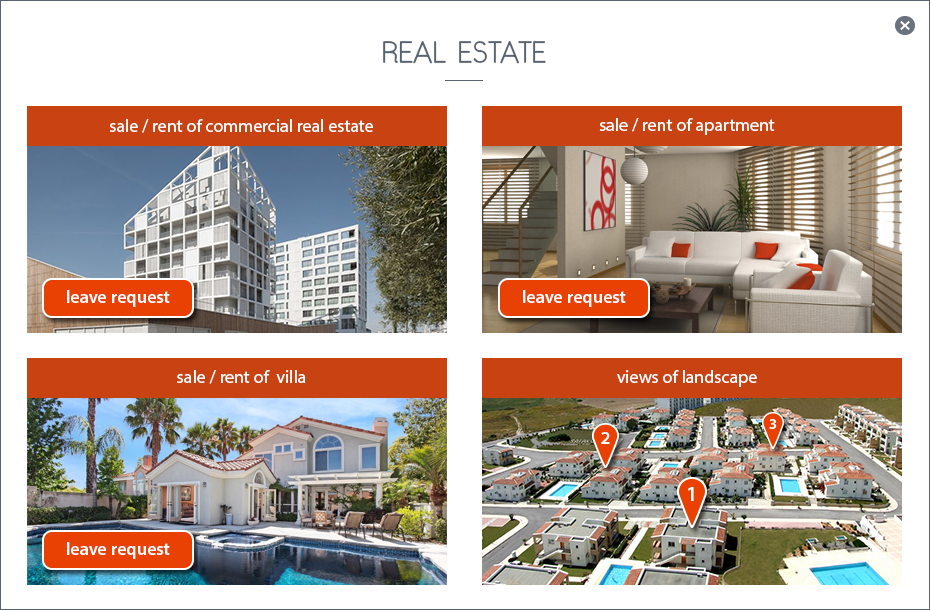
<style>
.page{position:relative;width:930px;height:610px;background:#ffffff}
.page>*{position:absolute;margin:0}
.t1{font:30px "GardensC";color:#59626f;text-transform:uppercase}
.t2{font:18.2px "MyriadPro-Regular";color:#ffffff}
.t3{font:18px "MyriadPro-Regular";color:#ffffff}
.t4{font:18px "MyriadPro-Semibold";color:#ffffff}
.t5{font:15.2px "MyriadPro-Semibold";color:#ffffff}
.t6{font:18.5px "MyriadPro-Semibold";color:#ffffff}
.t7{font:21px "MyriadPro-Semibold";color:#ffffff}
</style>
<div class="page">
<p class="t1" style="left:383px;top:41px;width:163px;height:23px">real estate</p>
<p class="t2" style="left:109px;top:119px;width:264px;height:14px">sale / rent of commercial real estate</p>
<p class="t3" style="left:599px;top:118px;width:176px;height:17px">sale / rent of apartment</p>
<p class="t4" style="left:67px;top:290px;width:103px;height:17px">leave request</p>
<p class="t4" style="left:523px;top:290px;width:103px;height:17px">leave request</p>
<p class="t2" style="left:177px;top:370px;width:129px;height:14px">sale / rent of  villa</p>
<p class="t2" style="left:617px;top:370px;width:140px;height:17px">views of landscape</p>
<p class="t5" style="left:769px;top:419px;width:8px;height:10px">3</p>
<p class="t6" style="left:601px;top:432px;width:9px;height:12px">2</p>
<p class="t7" style="left:688px;top:487px;width:6px;height:14px">1</p>
<p class="t4" style="left:67px;top:542px;width:103px;height:17px">leave request</p>
</div>
